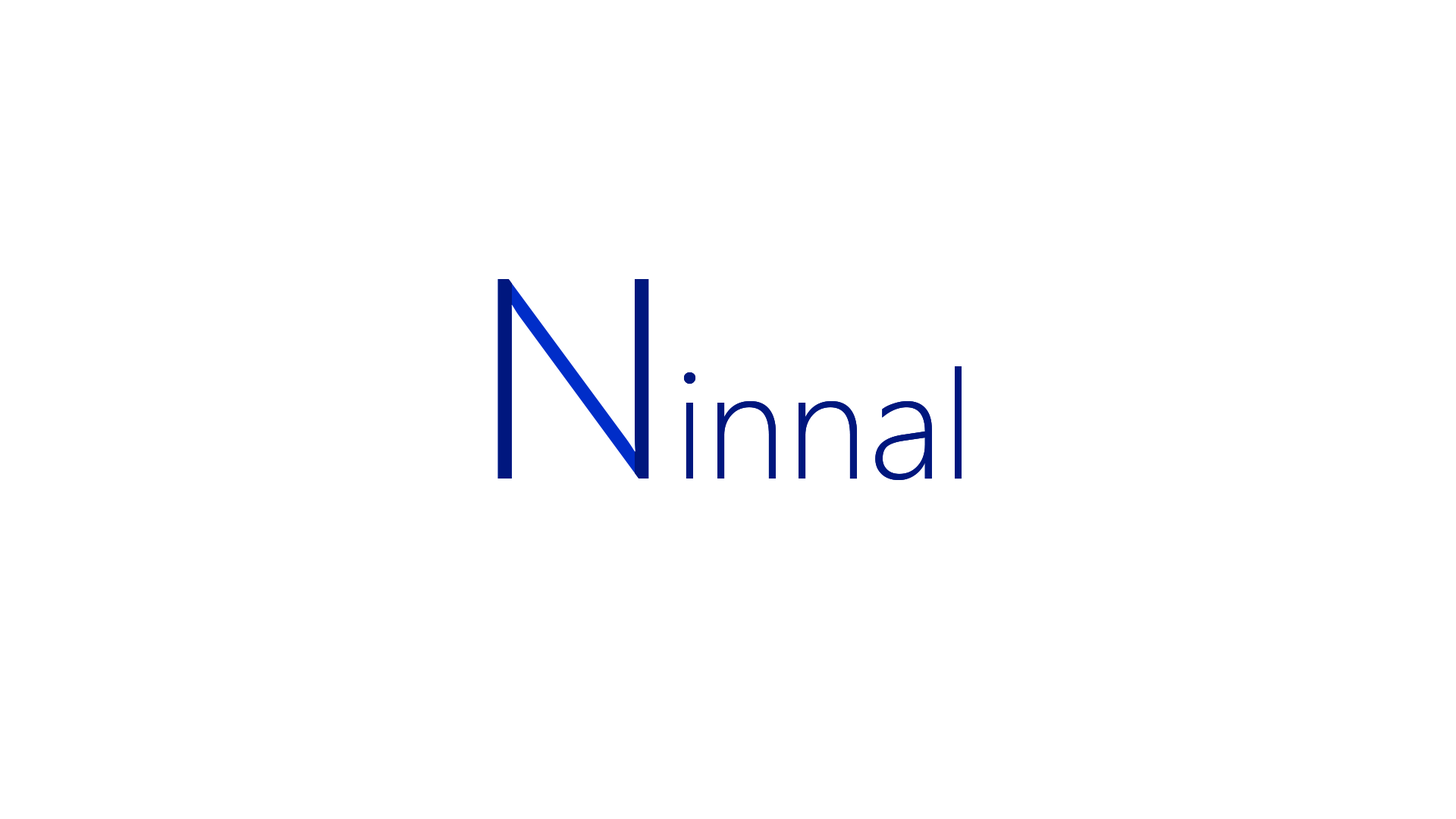
<style>
.page{position:relative;width:1456px;height:819px;background:#ffffff}
.page>*{position:absolute;margin:0}
.t1{font:151.7px "SegoeUI-Light";color:#00177e}
.t2{font:284.4px "SegoeUI-Light";color:#002dc8}
</style>
<div class="page">
<p class="t1" style="left:497px;top:279px;width:465px;height:201px"><span class="t2">N</span>innal</p>
</div>
